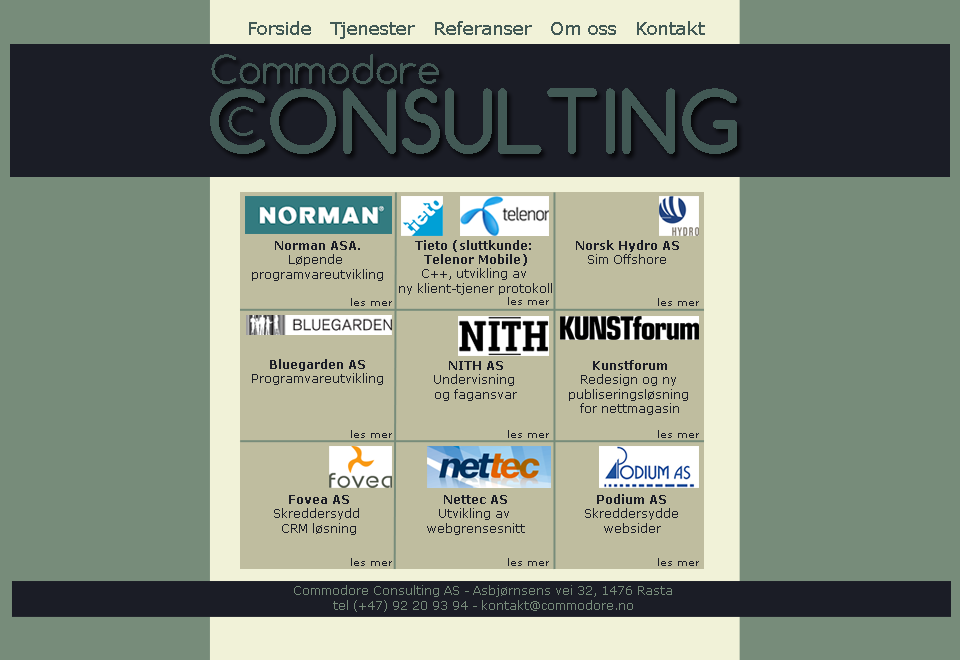
<style>
.page{position:relative;width:960px;height:660px;background:#778c7a}
.page>*{position:absolute;margin:0}
.t1{font:18px "Verdana";color:#425955}
.t2{font:37.8px "Comfortaa";color:#425955}
.t3{font:84px "Comfortaa-Bold";color:#425955}
.t4{font:12px "Verdana";color:#1b1d26}
.t5{font:12px "Verdana-Bold";color:#1b1d26}
.t6{font:10px "Verdana";color:#1b1d26}
.t7{font:12px "Verdana";color:#778c7a}
</style>
<div class="page">
<p class="t1" style="left:249px;top:21px;width:456px;height:18px">Forside   Tjenester   Referanser   Om oss   Kontakt</p>
<p class="t2" style="left:211px;top:54px;width:228px;height:30px">Commodore</p>
<p class="t3" style="left:210px;top:88px;width:527px;height:66px">CONSULTING</p>
<p class="t2" style="left:228px;top:106px;width:25px;height:30px">C</p>
<p class="t4" style="left:252px;top:241px;width:131px;height:40px;text-align:center"><span class="t5">Norman ASA.</span><br>Løpende <br>programvareutvikling</p>
<p class="t4" style="left:399px;top:240px;width:153px;height:55px;text-align:center"><span class="t5">Tieto (sluttkunde: <br>Telenor Mobile)<br></span>C++, utvikling av <br>ny klient-tjener protokoll</p>
<p class="t5" style="left:576px;top:240px;width:103px;height:24px;text-align:center">Norsk Hydro AS<br><span class="t4">Sim Offshore</span></p>
<p class="t6" style="left:351px;top:298px;width:41px;height:8px">les mer</p>
<p class="t6" style="left:508px;top:297px;width:41px;height:8px">les mer</p>
<p class="t6" style="left:658px;top:298px;width:41px;height:8px">les mer</p>
<p class="t4" style="left:252px;top:359px;width:131px;height:26px;text-align:center"><span class="t5">Bluegarden AS<br></span>Programvareutvikling</p>
<p class="t4" style="left:434px;top:361px;width:83px;height:40px;text-align:center"><span class="t5">NITH AS<br></span>Undervisning <br>og fagansvar</p>
<p class="t4" style="left:569px;top:360px;width:119px;height:55px;text-align:center"><span class="t5">Kunstforum<br></span>Redesign og ny <br>publiseringsløsning <br>for nettmagasin</p>
<p class="t6" style="left:351px;top:430px;width:41px;height:8px">les mer</p>
<p class="t6" style="left:508px;top:430px;width:41px;height:8px">les mer</p>
<p class="t6" style="left:658px;top:430px;width:41px;height:8px">les mer</p>
<p class="t4" style="left:274px;top:495px;width:85px;height:40px;text-align:center"><span class="t5">Fovea AS<br></span>Skreddersydd <br>CRM løsning</p>
<p class="t4" style="left:427px;top:495px;width:98px;height:40px;text-align:center"><span class="t5">Nettec AS<br></span>Utvikling av <br>webgrensesnitt</p>
<p class="t4" style="left:585px;top:494px;width:93px;height:39px;text-align:center"><span class="t5">Podium AS<br></span>Skreddersydde<br>websider</p>
<p class="t6" style="left:351px;top:558px;width:41px;height:8px">les mer</p>
<p class="t6" style="left:508px;top:558px;width:41px;height:8px">les mer</p>
<p class="t6" style="left:658px;top:558px;width:41px;height:8px">les mer</p>
<p class="t7" style="left:294px;top:585px;width:378px;height:27px;text-align:center">Commodore Consulting AS - Asbjørnsens vei 32, 1476 Rasta <br>tel (+47) 92 20 93 94 - kontakt@commodore.no</p>
</div>
